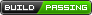
<style>
.page{position:relative;width:92px;height:15px}
.page>*{position:absolute;margin:0}
.t1{font:10.4px "VisitorTT1BRK";letter-spacing:-0.02em;color:#ffffff}
</style>
<div class="page">
<p class="t1" style="left:5px;top:5px;width:29px;height:5px">BUILD</p>
<p class="t1" style="left:46px;top:5px;width:41px;height:5px">PASSING</p>
</div>
